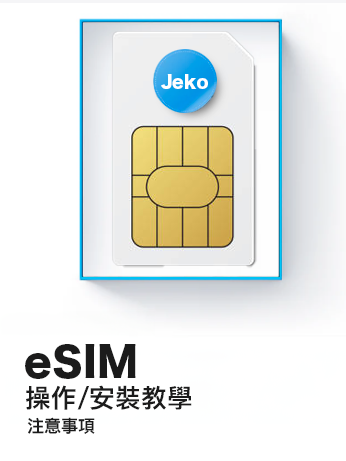
<style>
.page{position:relative;width:346px;height:461px;background:#ffffff}
.page>*{position:absolute;margin:0}
.t1{font:16.9px "HiraKakuStd-W8";color:#ffffff}
.t2{font:40.3px "HiraKakuStd-W8";color:#1b1b1b}
.t3{font:25.7px "PingFangHK-Semibold";color:#1b1b1b}
.t4{font:17.2px "PingFangHK-Semibold";color:#1b1b1b}
</style>
<div class="page">
<p class="t1" style="left:161px;top:74px;width:47px;height:15px">Jeko</p>
<p class="t2" style="left:25px;top:344px;width:111px;height:35px">eSIM</p>
<p class="t3" style="left:26px;top:385px;width:166px;height:25px">操作/安裝教學</p>
<p class="t4" style="left:27px;top:417px;width:68px;height:17px">注意事項</p>
</div>
